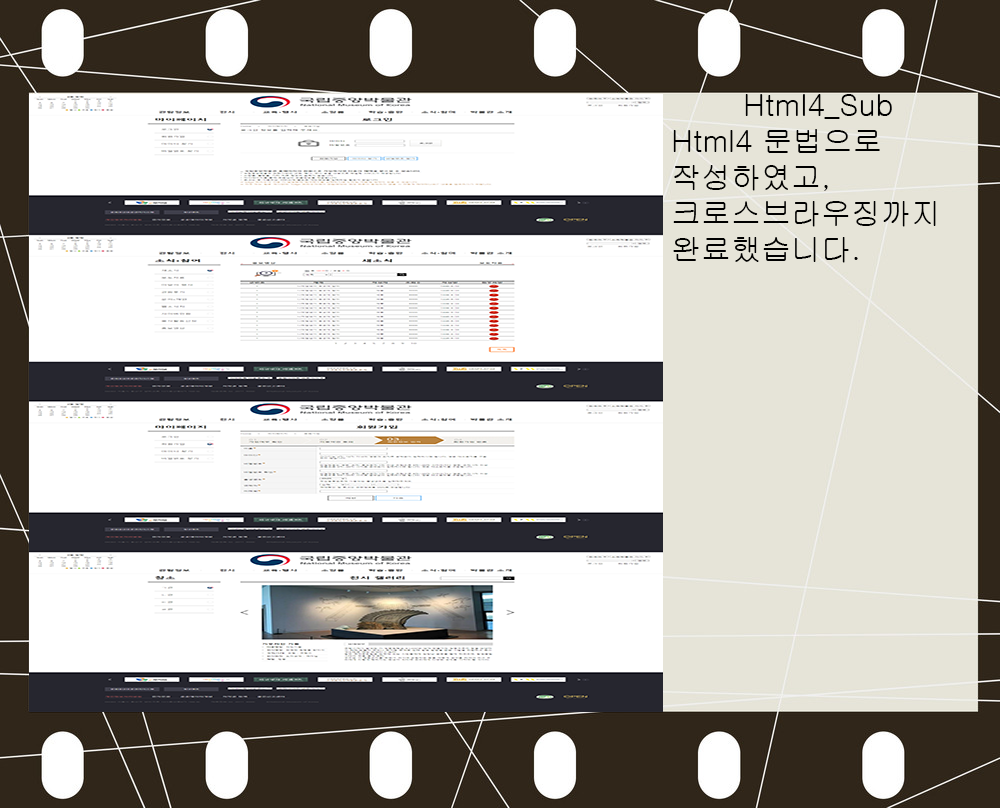
<style>
.page{position:relative;width:1000px;height:808px;background:#ffffff}
.page>*{position:absolute;margin:0}
.t1{font:30px "Gulim";color:#000000}
</style>
<div class="page">
<p class="t1" style="left:673px;top:94px;width:263px;height:169px;text-align:center">Html4_Sub<br> Html4 문법으로                  <br> 작성하였고,<br> 크로스브라우징까지 <br> 완료했습니다.</p>
</div>
